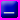
<style>
.page{position:relative;width:20px;height:20px;background:#ff00ff}
.page>*{position:absolute;margin:0}
.t1{font:18px "Arial-BoldMT";letter-spacing:0.2em;color:#cdcbcb}
</style>
<div class="page">
<p class="t1" style="left:3px;top:12px;width:12px;height:2px">_</p>
<p class="t1" style="left:3px;top:12px;width:12px;height:2px">_</p>
</div>
